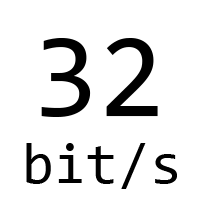
<style>
.page{position:relative;width:200px;height:200px;background:#ffffff}
.page>*{position:absolute;margin:0}
.t1{font:120.8px "Consolas";color:#000000}
.t2{font:58.3px "Consolas";color:#000000}
</style>
<div class="page">
<p class="t1" style="left:41px;top:38px;width:117px;height:79px">32</p>
<p class="t2" style="left:26px;top:143px;width:151px;height:46px">bit/s</p>
</div>
